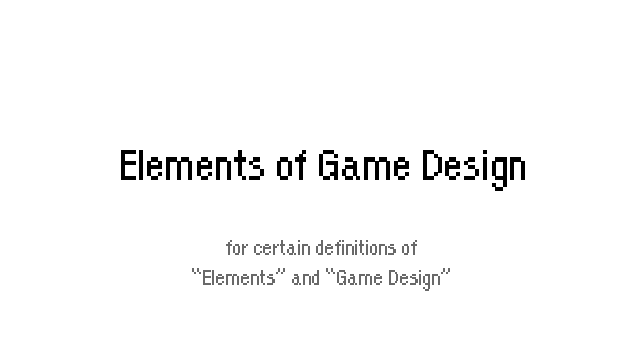
<style>
.page{position:relative;width:640px;height:360px;background:#ffffff}
.page>*{position:absolute;margin:0}
.t1{font:12px "OrangeKid-Regular";color:#000000}
.t2{font:25px "OrangeKid-Regular";color:#696969}
</style>
<div class="page">
<p class="t1" style="left:121px;top:150px;width:404px;height:41px;text-align:center">Elements of Game Design</p>
<p class="t2" style="left:192px;top:240px;width:258px;height:51px;text-align:center">for certain definitions of<br>“Elements” and “Game Design”</p>
</div>
